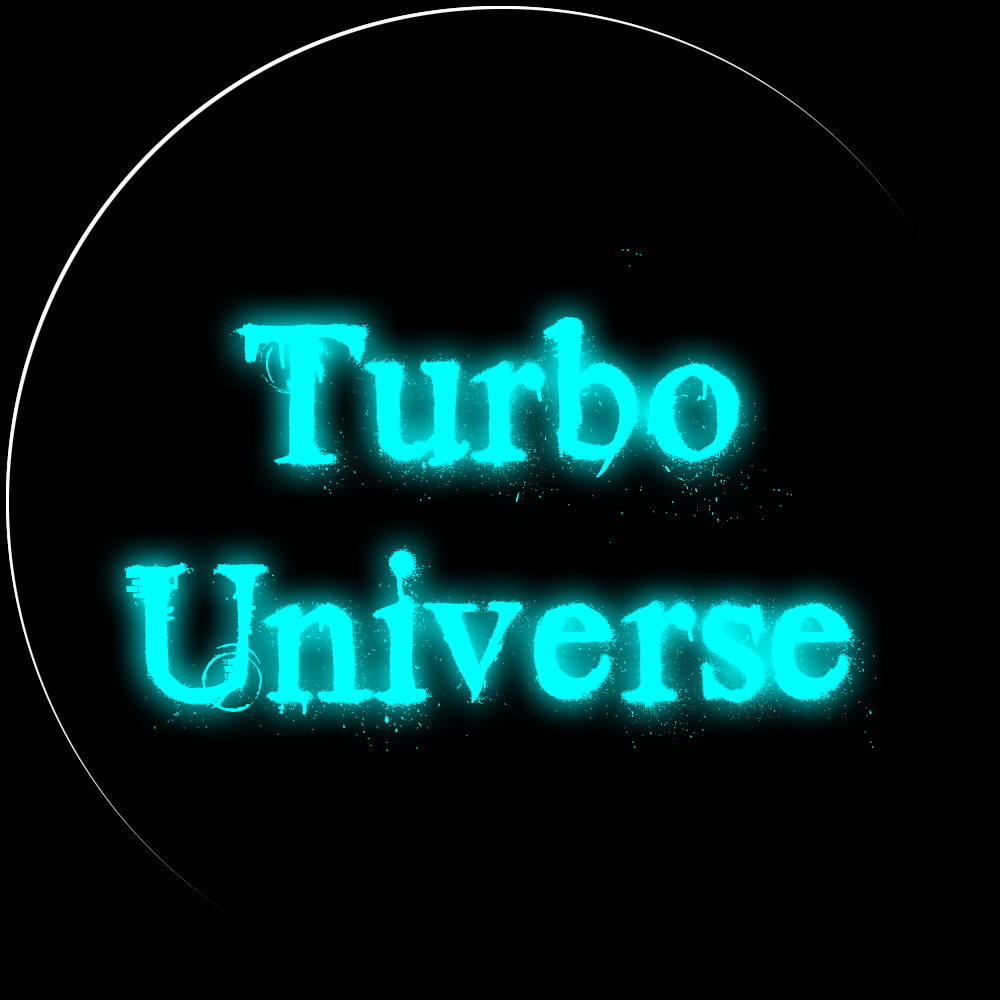
<style>
.page{position:relative;width:1000px;height:1000px;background:#000000}
.page>*{position:absolute;margin:0}
.t1{font:200px "TimesNewYorker";color:#00ffff}
</style>
<div class="page">
<p class="t1" style="left:124px;top:249px;width:752px;height:503px;text-align:center">Turbo<br>Universe</p>
</div>
